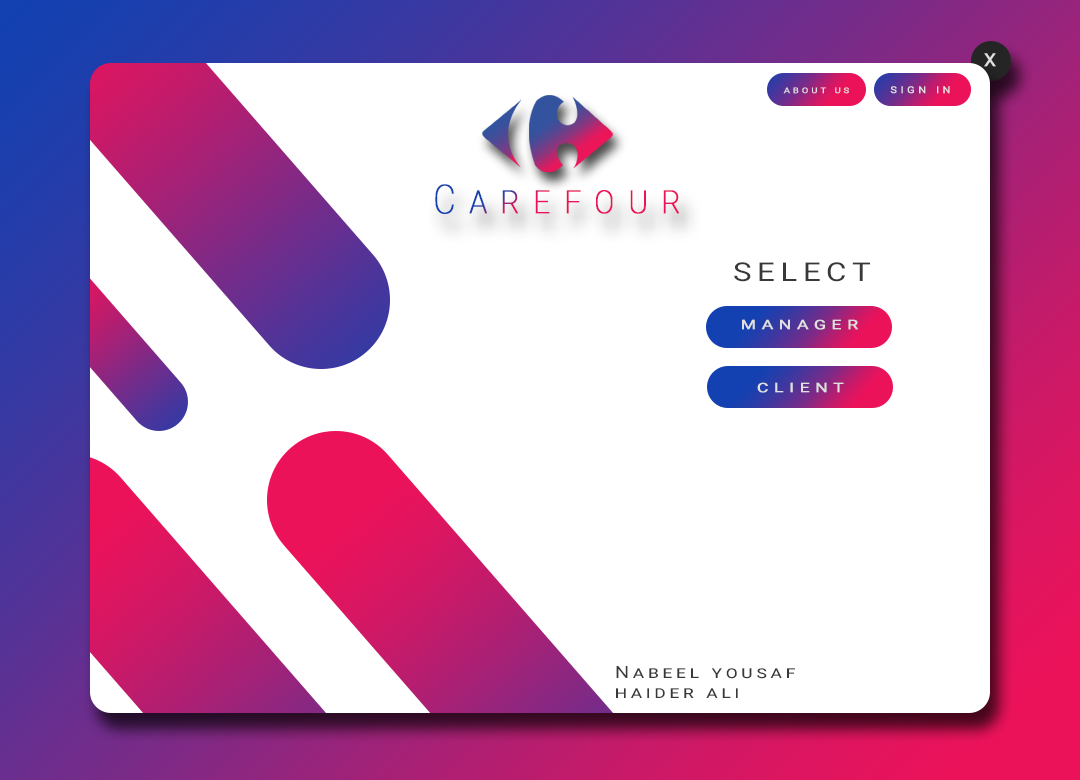
<style>
.page{position:relative;width:1080px;height:780px;background:#ffffff}
.page>*{position:absolute;margin:0}
.t1{font:18px "Roboto-Regular";letter-spacing:0.3em;color:#e0e0e0;font-weight:bold;scale:1.05 1}
.t2{font:7.9px "Roboto-Regular";letter-spacing:0.3em;color:#e0e0e0;text-transform:uppercase;font-weight:bold;scale:1.19 1}
.t3{font:9.4px "Roboto-Regular";letter-spacing:0.3em;color:#e0e0e0;text-transform:uppercase;font-weight:bold;scale:1.17 1}
.t4{font:40px "Roboto-Thin";letter-spacing:0.38em;font-variant:small-caps;font-weight:bold;scale:0.85 1}
.t5{font:26px "Roboto-Regular";letter-spacing:0.18em;color:#383838;text-transform:uppercase;scale:1.2 1}
.t6{font:13px "Roboto-Regular";letter-spacing:0.3em;color:#e0e0e0;text-transform:uppercase;font-weight:bold;scale:1.34 1}
.t7{font:16.9px "Roboto-Regular";letter-spacing:0.18em;color:#383838;font-variant:small-caps;scale:1.2 1}
</style>
<div class="page">
<p class="t1" style="left:984px;top:53px;width:12px;height:14px">X</p>
<p class="t2" style="left:783px;top:87px;width:66px;height:7px">About Us</p>
<p class="t3" style="left:890px;top:86px;width:60px;height:8px">sign In</p>
<p class="t4" style="left:435px;top:184px;width:244px;height:30px">Carefour</p>
<p class="t5" style="left:734px;top:262px;width:136px;height:20px">select</p>
<p class="t6" style="left:742px;top:319px;width:116px;height:11px">manager</p>
<p class="t6" style="left:757px;top:382px;width:87px;height:11px">Client</p>
<p class="t7" style="left:616px;top:666px;width:179px;height:32px">Nabeel yousaf<br>haider ali</p>
</div>
